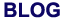
<style>
.page{position:relative;width:70px;height:20px;background:#ffffff}
.page>*{position:absolute;margin:0}
.t1{font:20px "Arial-BoldMT";color:#0d0664}
</style>
<div class="page">
<p class="t1" style="left:4px;top:2px;width:56px;height:16px">BLOG</p>
</div>
